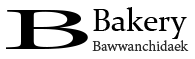
<style>
.page{position:relative;width:195px;height:59px;background:#ffffff}
.page>*{position:absolute;margin:0}
.t1{font:73.7px "AdobeThai-Regular";color:#000000;scale:2.67 1}
.t2{font:32px "Constantia";color:#000000}
.t3{font:18px "AdobeThai-Regular";color:#2c2c2c}
</style>
<div class="page">
<p class="t1" style="left:6px;top:10px;width:82px;height:39px">B</p>
<p class="t2" style="left:93px;top:7px;width:94px;height:32px">Bakery</p>
<p class="t3" style="left:92px;top:40px;width:97px;height:11px">Bawwanchidaek</p>
</div>
